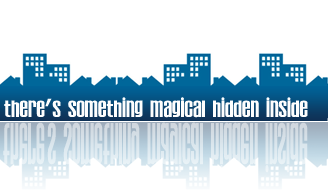
<style>
.page{position:relative;width:328px;height:196px;background:#ffffff}
.page>*{position:absolute;margin:0}
.t1{font:24px "Establo";color:#fefefe}
.t2{font:24px "Futura-Condensed-Bold";color:#fefefe}
</style>
<div class="page">
<p class="t1" style="left:4px;top:97px;width:304px;height:21px">there<span class="t2">’</span>s something magical hidden inside</p>
</div>
